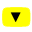
<style>
.page{position:relative;width:32px;height:32px;background:#ffffff}
.page>*{position:absolute;margin:0}
.t1{font:13.6px "Arial-ItalicMT";color:#000000}
</style>
<div class="page">
<p class="t1" style="left:10px;top:12px;width:11px;height:10px">▼</p>
</div>
